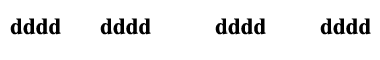
<style>
.page{position:relative;width:380px;height:60px;background:#ffffff}
.page>*{position:absolute;margin:0}
.t1{font:23px "TimesNewRomanPS-BoldMT";color:#000000}
</style>
<div class="page">
<p class="t1" style="left:10px;top:18px;width:51px;height:17px">dddd</p>
<p class="t1" style="left:100px;top:18px;width:51px;height:17px">dddd</p>
<p class="t1" style="left:215px;top:18px;width:51px;height:17px">dddd</p>
<p class="t1" style="left:320px;top:18px;width:51px;height:17px">dddd</p>
</div>
